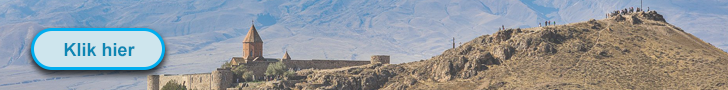
<style>
.page{position:relative;width:728px;height:90px}
.page>*{position:absolute;margin:0}
.t1{font:18px "Arial-BoldMT";color:#0d87b4}
</style>
<div class="page">
<p class="t1" style="left:64px;top:43px;width:71px;height:14px">Klik hier</p>
</div>
